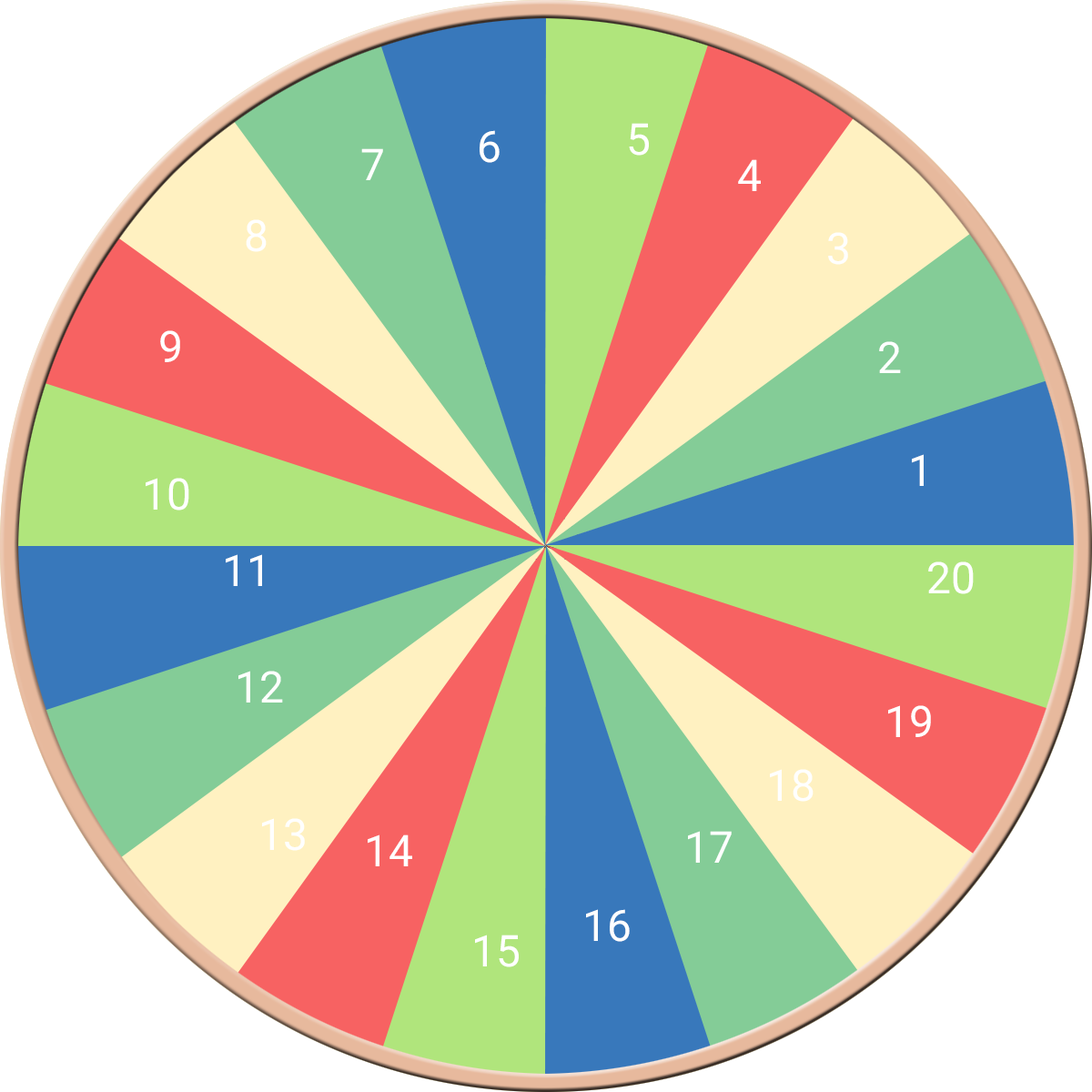
<style>
.page{position:relative;width:1092px;height:1092px;background:#ffffff}
.page>*{position:absolute;margin:0}
.t1{font:43.7px "Roboto-Regular";color:#ffffff}
</style>
<div class="page">
<p class="t1" style="left:629px;top:123px;width:20px;height:33px">5</p>
<p class="t1" style="left:480px;top:130px;width:20px;height:33px">6</p>
<p class="t1" style="left:361px;top:148px;width:22px;height:32px">7</p>
<p class="t1" style="left:738px;top:159px;width:23px;height:32px">4</p>
<p class="t1" style="left:246px;top:219px;width:21px;height:33px">8</p>
<p class="t1" style="left:828px;top:232px;width:20px;height:33px">3</p>
<p class="t1" style="left:160px;top:330px;width:20px;height:32px">9</p>
<p class="t1" style="left:879px;top:341px;width:22px;height:32px">2</p>
<p class="t1" style="left:912px;top:454px;width:12px;height:32px">1</p>
<p class="t1" style="left:146px;top:478px;width:43px;height:33px">10</p>
<p class="t1" style="left:226px;top:554px;width:36px;height:32px">11</p>
<p class="t1" style="left:928px;top:561px;width:46px;height:33px">20</p>
<p class="t1" style="left:238px;top:671px;width:45px;height:32px">12</p>
<p class="t1" style="left:888px;top:705px;width:43px;height:32px">19</p>
<p class="t1" style="left:770px;top:769px;width:44px;height:33px">18</p>
<p class="t1" style="left:262px;top:818px;width:43px;height:33px">13</p>
<p class="t1" style="left:688px;top:831px;width:44px;height:32px">17</p>
<p class="t1" style="left:368px;top:834px;width:44px;height:32px">14</p>
<p class="t1" style="left:586px;top:909px;width:44px;height:33px">16</p>
<p class="t1" style="left:475px;top:935px;width:44px;height:32px">15</p>
</div>
